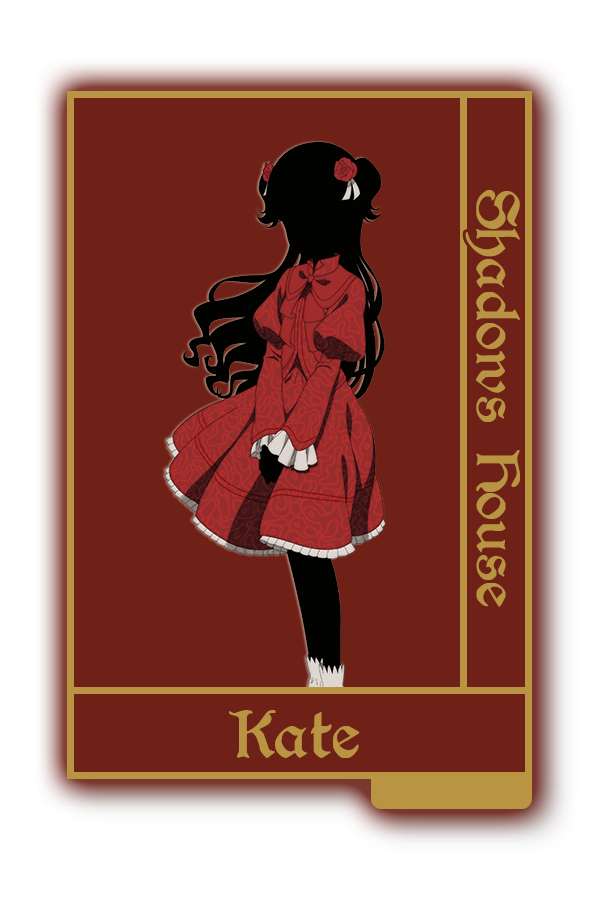
<style>
.page{position:relative;width:600px;height:900px;background:#6f2117}
.page>*{position:absolute;margin:0}
.t1{font:67.9px "Augusta-Regular";color:#b89443}
.t2{font:75px "Augusta-Regular";color:#b89443}
</style>
<div class="page">
<p class="t1" style="left:465px;top:190px;width:55px;height:417px;rotate:90deg">Shadows House</p>
<p class="t2" style="left:229px;top:710px;width:131px;height:48px">Kate</p>
</div>
